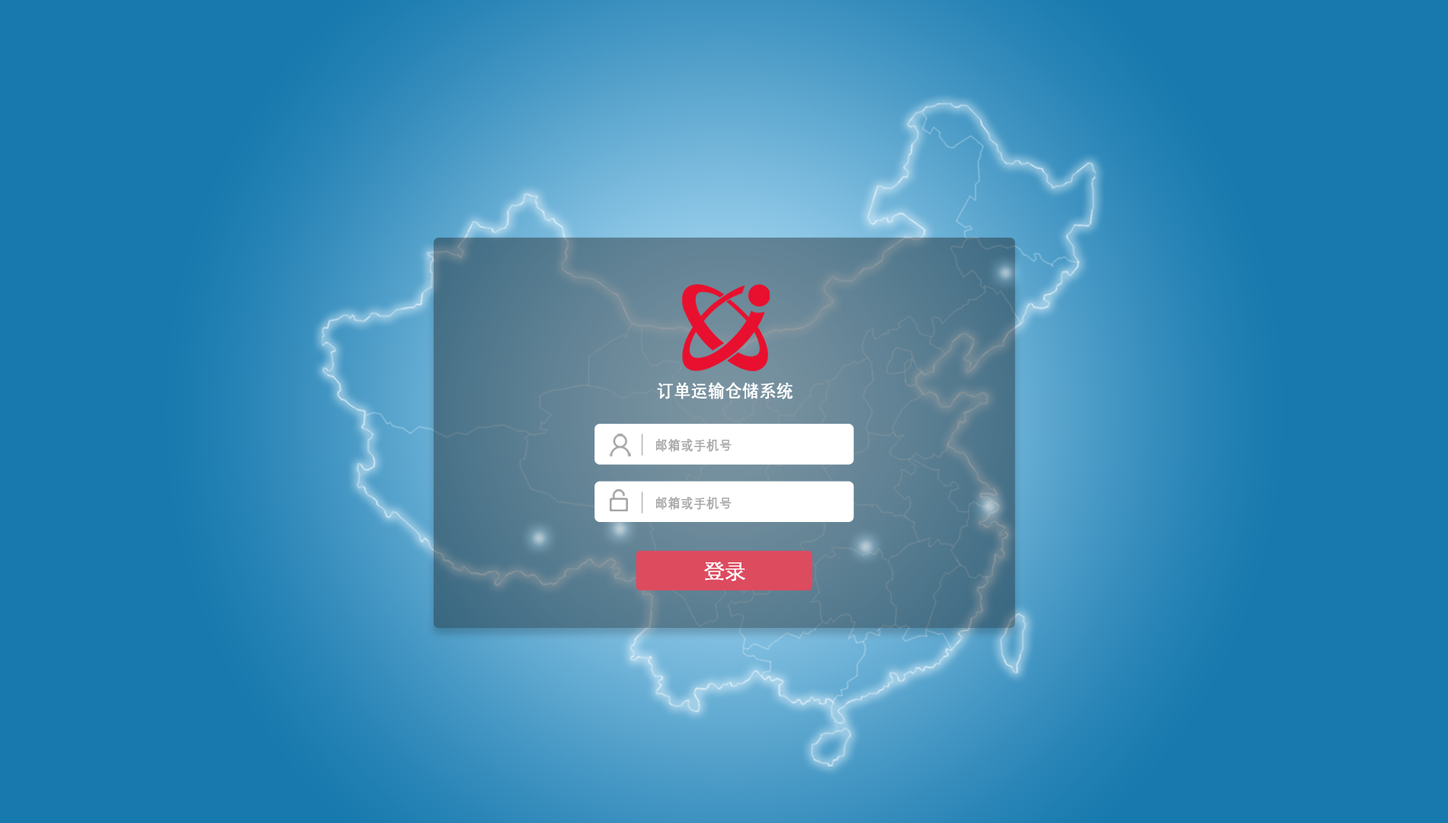
<style>
.page{position:relative;width:1448px;height:823px;background:#1779ae}
.page>*{position:absolute;margin:0}
.t1{font:17.7px "SimHei";color:#ffffff;font-weight:bold;scale:0.94 1}
.t2{font:13.3px "STHeitiSC-Light";color:#a8a8a8;font-weight:bold;scale:0.94 1}
.t3{font:21.7px "STHeitiSC-Light";color:#ffffff;font-weight:bold;scale:0.94 1}
</style>
<div class="page">
<p class="t1" style="left:657px;top:382px;width:137px;height:17px">订单运输仓储系统</p>
<p class="t2" style="left:656px;top:439px;width:76px;height:13px">邮箱或手机号</p>
<p class="t2" style="left:656px;top:497px;width:76px;height:13px">邮箱或手机号</p>
<p class="t3" style="left:704px;top:562px;width:42px;height:20px">登录</p>
</div>
